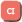
<style>
.page{position:relative;width:22px;height:22px;background:#ec7063}
.page>*{position:absolute;margin:0}
.t1{font:8px "Tahoma";color:#ffffff}
</style>
<div class="page">
<p class="t1" style="left:7px;top:8px;width:8px;height:7px">CI</p>
</div>
